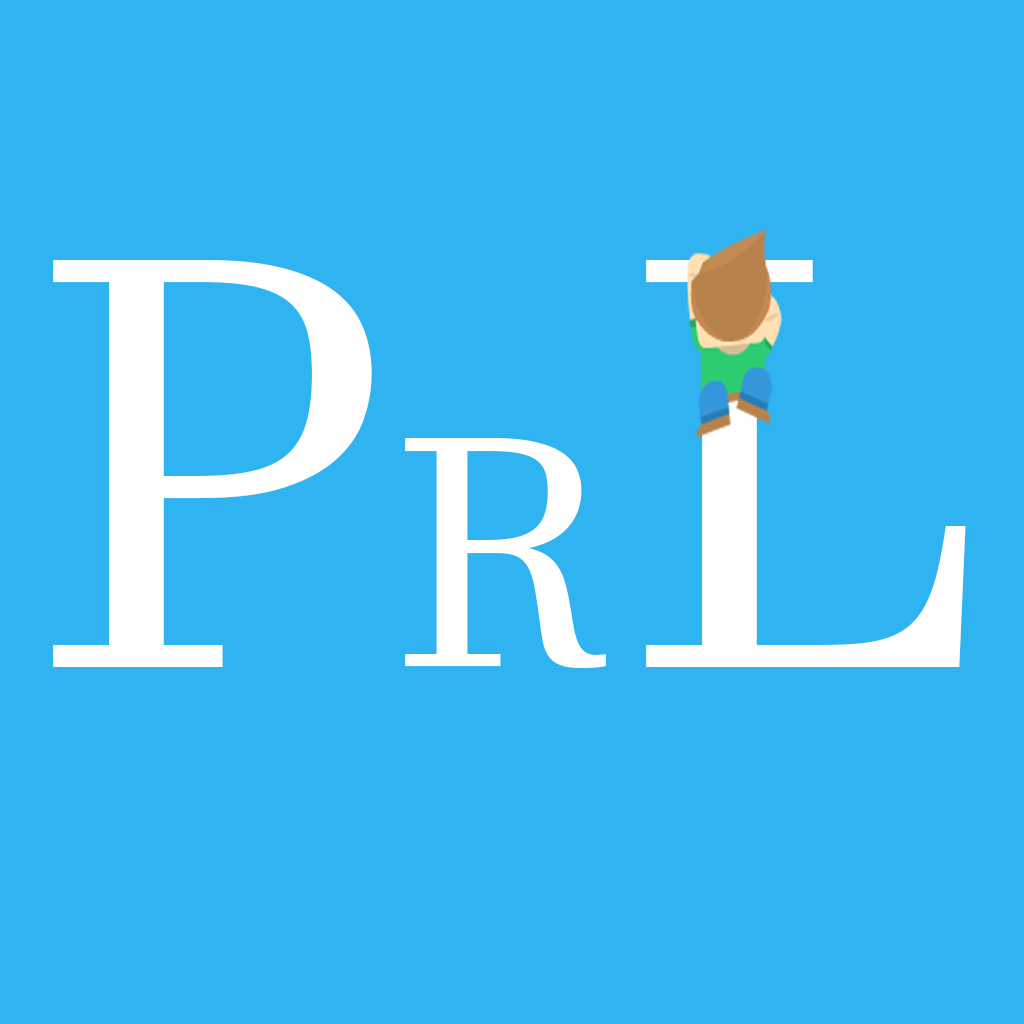
<style>
.page{position:relative;width:1024px;height:1024px;background:#2fb3f1}
.page>*{position:absolute;margin:0}
.t1{font:573.3px "JavaneseText";color:#ffffff}
.t2{font:322.4px "JavaneseText";color:#ffffff}
</style>
<div class="page">
<p class="t1" style="left:53px;top:260px;width:319px;height:407px">P</p>
<p class="t1" style="left:646px;top:260px;width:320px;height:407px">L</p>
<p class="t2" style="left:405px;top:438px;width:201px;height:230px">R</p>
</div>
